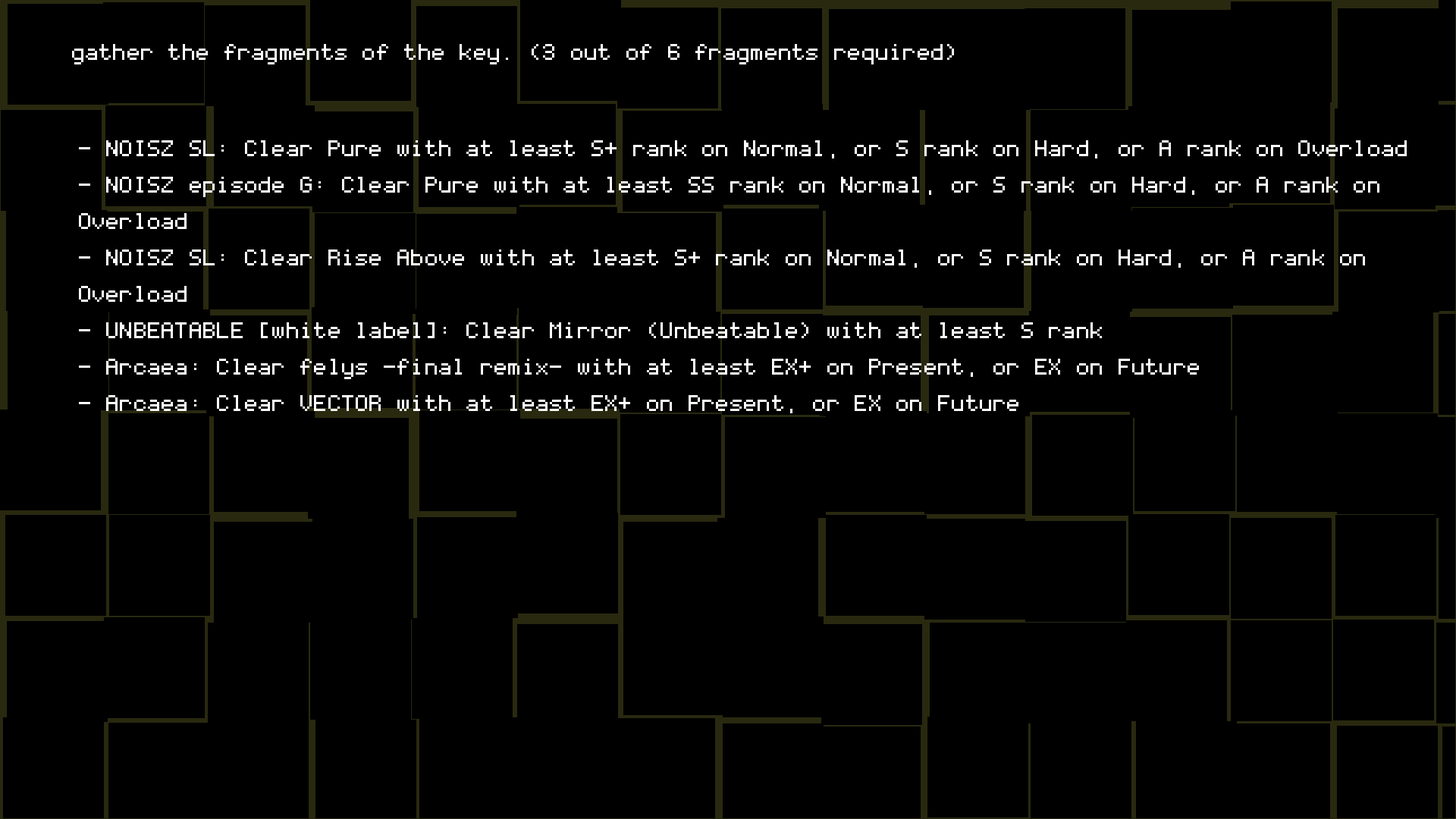
<style>
.page{position:relative;width:1456px;height:819px;background:#000000}
.page>*{position:absolute;margin:0}
.t1{font:36.4px "Coder's-Crux";color:#ffffff}
.t2{font:36.4px/36.4px "Coder's-Crux";color:#ffffff}
</style>
<div class="page">
<p class="t1" style="left:72px;top:44px;width:882px;height:20px">gather the fragments of the key. (3 out of 6 fragments required)</p>
<p class="t2" style="left:79px;top:140px;width:1328px;height:273px">- NOISZ SL: Clear Pure with at least S+ rank on Normal, or S rank on Hard, or A rank on Overload<br>- NOISZ episode G: Clear Pure with at least SS rank on Normal, or S rank on Hard, or A rank on <br>Overload<br>- NOISZ SL: Clear Rise Above with at least S+ rank on Normal, or S rank on Hard, or A rank on <br>Overload<br>- UNBEATABLE [white label]: Clear Mirror (Unbeatable) with at least S rank<br>- Arcaea: Clear felys -final remix- with at least EX+ on Present, or EX on Future<br>- Arcaea: Clear VECTOR with at least EX+ on Present, or EX on Future</p>
</div>
